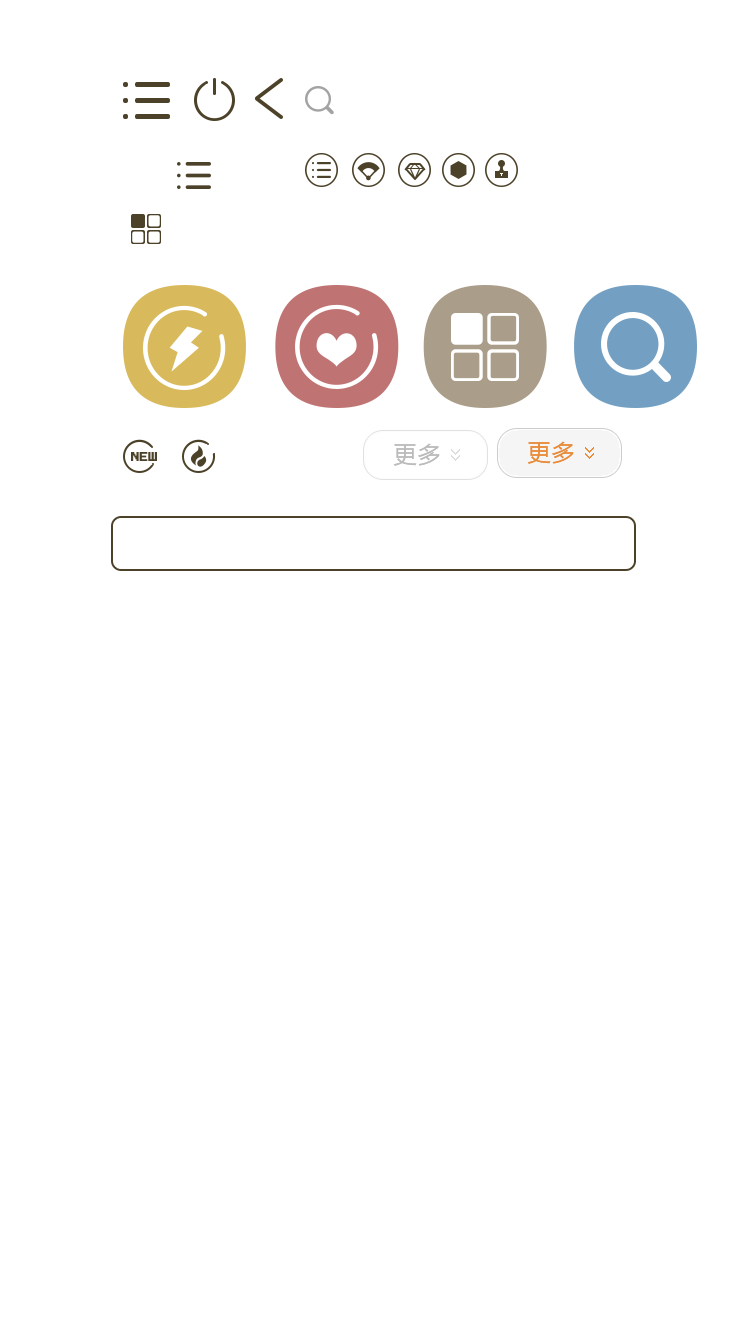
<style>
.page{position:relative;width:750px;height:1334px;background:#ffffff}
.page>*{position:absolute;margin:0}
.t1{font:24px "FZLTHJW--GB1-0";color:#bbbbbb}
.t2{font:24px "FZLTHJW--GB1-0";color:#e78c3b}
</style>
<div class="page">
<p class="t1" style="left:393px;top:443px;width:47px;height:23px">更多</p>
<p class="t2" style="left:527px;top:441px;width:47px;height:23px">更多</p>
</div>
